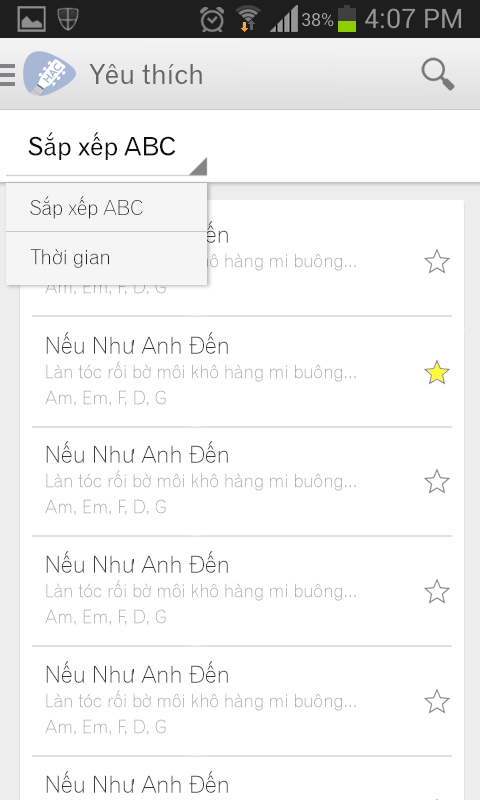
<style>
.page{position:relative;width:480px;height:800px;background:#ffffff}
.page>*{position:absolute;margin:0}
.t1{font:27px "UVNGioMay";color:#666666}
.t2{font:25px "UVNGioMay";color:#0e0e0e}
.t3{font:20px "UVNGioMayNhe";color:#1e1e1e}
.t4{font:23px "UVNGioMayNhe";color:#f5f5f5}
.t5{font:18px "UVNGioMayNhe";color:#a5a5a5}
.t6{font:23px "UVNGioMayNhe";color:#3a3a3a}
</style>
<div class="page">
<p class="t1" style="left:89px;top:64px;width:113px;height:20px">Yêu thích</p>
<p class="t2" style="left:28px;top:132px;width:148px;height:28px">Sắp xếp ABC</p>
<p class="t3" style="left:30px;top:196px;width:113px;height:23px">Sắp xếp ABC</p>
<p class="t4" style="left:46px;top:221px;width:182px;height:22px">Nếu Như Anh Đến</p>
<p class="t3" style="left:30px;top:249px;width:79px;height:19px">Thời gian</p>
<p class="t5" style="left:45px;top:279px;width:121px;height:17px">Am, Em, F, D, G</p>
<p class="t6" style="left:46px;top:332px;width:182px;height:22px">Nếu Như Anh Đến</p>
<p class="t5" style="left:46px;top:361px;width:310px;height:21px">Làn tóc rối bờ môi khô hàng mi buông...</p>
<p class="t5" style="left:45px;top:390px;width:121px;height:17px">Am, Em, F, D, G</p>
<p class="t6" style="left:46px;top:441px;width:182px;height:22px">Nếu Như Anh Đến</p>
<p class="t5" style="left:46px;top:470px;width:310px;height:21px">Làn tóc rối bờ môi khô hàng mi buông...</p>
<p class="t5" style="left:45px;top:499px;width:121px;height:17px">Am, Em, F, D, G</p>
<p class="t6" style="left:46px;top:551px;width:182px;height:22px">Nếu Như Anh Đến</p>
<p class="t5" style="left:46px;top:580px;width:310px;height:21px">Làn tóc rối bờ môi khô hàng mi buông...</p>
<p class="t5" style="left:45px;top:609px;width:121px;height:17px">Am, Em, F, D, G</p>
<p class="t6" style="left:46px;top:661px;width:182px;height:22px">Nếu Như Anh Đến</p>
<p class="t5" style="left:46px;top:690px;width:310px;height:21px">Làn tóc rối bờ môi khô hàng mi buông...</p>
<p class="t5" style="left:45px;top:719px;width:121px;height:17px">Am, Em, F, D, G</p>
<p class="t6" style="left:46px;top:771px;width:182px;height:22px">Nếu Như Anh Đến</p>
</div>
